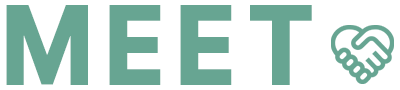
<style>
.page{position:relative;width:400px;height:90px;background:#ffffff}
.page>*{position:absolute;margin:0}
.t1{font:110px "Inter-ExtraBold";letter-spacing:0.1em;color:#67a592;text-transform:uppercase;scale:0.91 1}
</style>
<div class="page">
<p class="t1" style="left:6px;top:5px;width:306px;height:80px">MEET</p>
</div>
